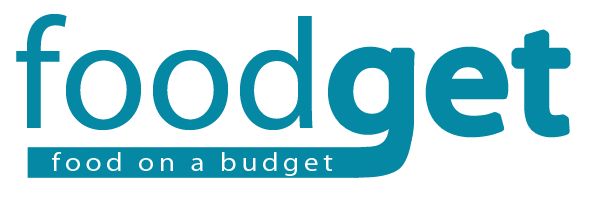
<style>
.page{position:relative;width:590px;height:198px;background:#ffffff}
.page>*{position:absolute;margin:0}
.t1{font:158.3px "MyriadPro-Regular";color:#0588a4}
.t2{font:26px "MyriadPro-Regular";letter-spacing:0.16em;color:#ffffff;scale:1.12 1}
</style>
<div class="page">
<p class="t1" style="left:16px;top:14px;width:297px;height:117px">food</p>
<p class="t2" style="left:52px;top:152px;width:281px;height:24px">food on a budget</p>
</div>
